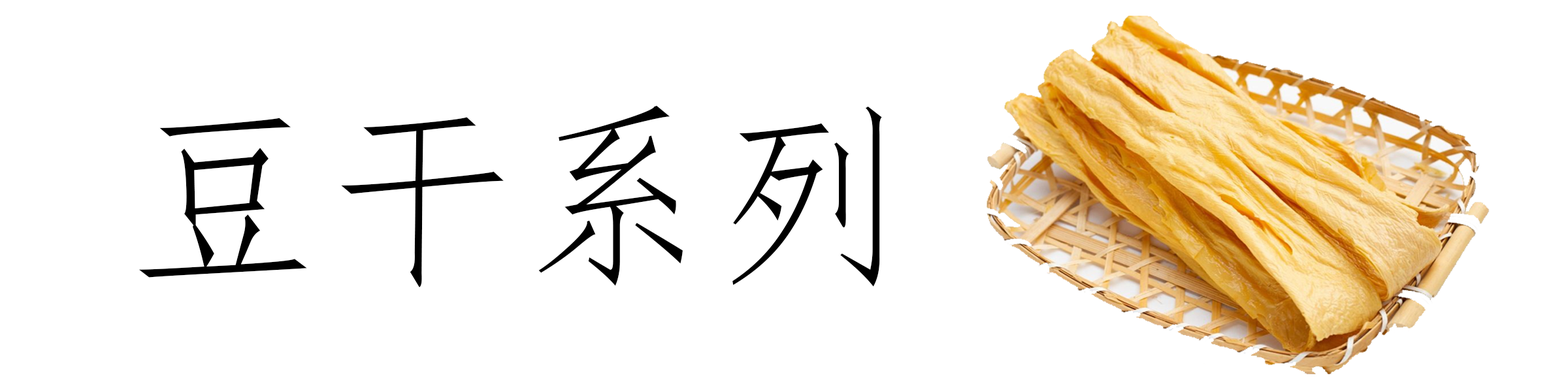
<style>
.page{position:relative;width:1568px;height:392px;background:#ffffff}
.page>*{position:absolute;margin:0}
.t1{font:196px "FangSong";color:#000000}
</style>
<div class="page">
<p class="t1" style="left:139px;top:105px;width:743px;height:182px">豆干系列</p>
</div>
